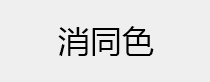
<style>
.page{position:relative;width:210px;height:82px;background:#efefef}
.page>*{position:absolute;margin:0}
.t1{font:32px "MicrosoftYaHei";color:#000000}
</style>
<div class="page">
<p class="t1" style="left:58px;top:26px;width:96px;height:30px">消同色</p>
</div>
